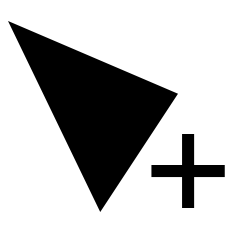
<style>
.page{position:relative;width:250px;height:250px;background:#ffffff}
.page>*{position:absolute;margin:0}
.t1{font:143.3px "Helvetica";color:#000000}
</style>
<div class="page">
<p class="t1" style="left:151px;top:134px;width:74px;height:74px">+</p>
</div>
